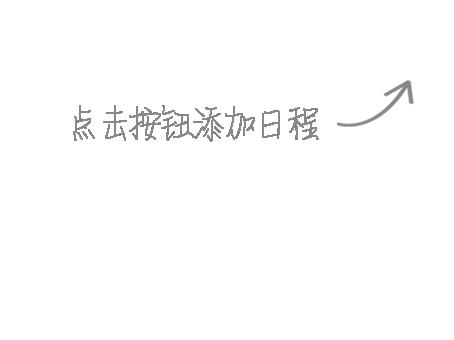
<style>
.page{position:relative;width:454px;height:340px;background:#ffffff}
.page>*{position:absolute;margin:0}
.t1{font:36.4px "MFQingShu_Noncommercial-Regular";color:#888888;text-transform:uppercase;font-weight:bold}
</style>
<div class="page">
<p class="t1" style="left:73px;top:105px;width:246px;height:37px">点击按钮添加日程</p>
</div>
